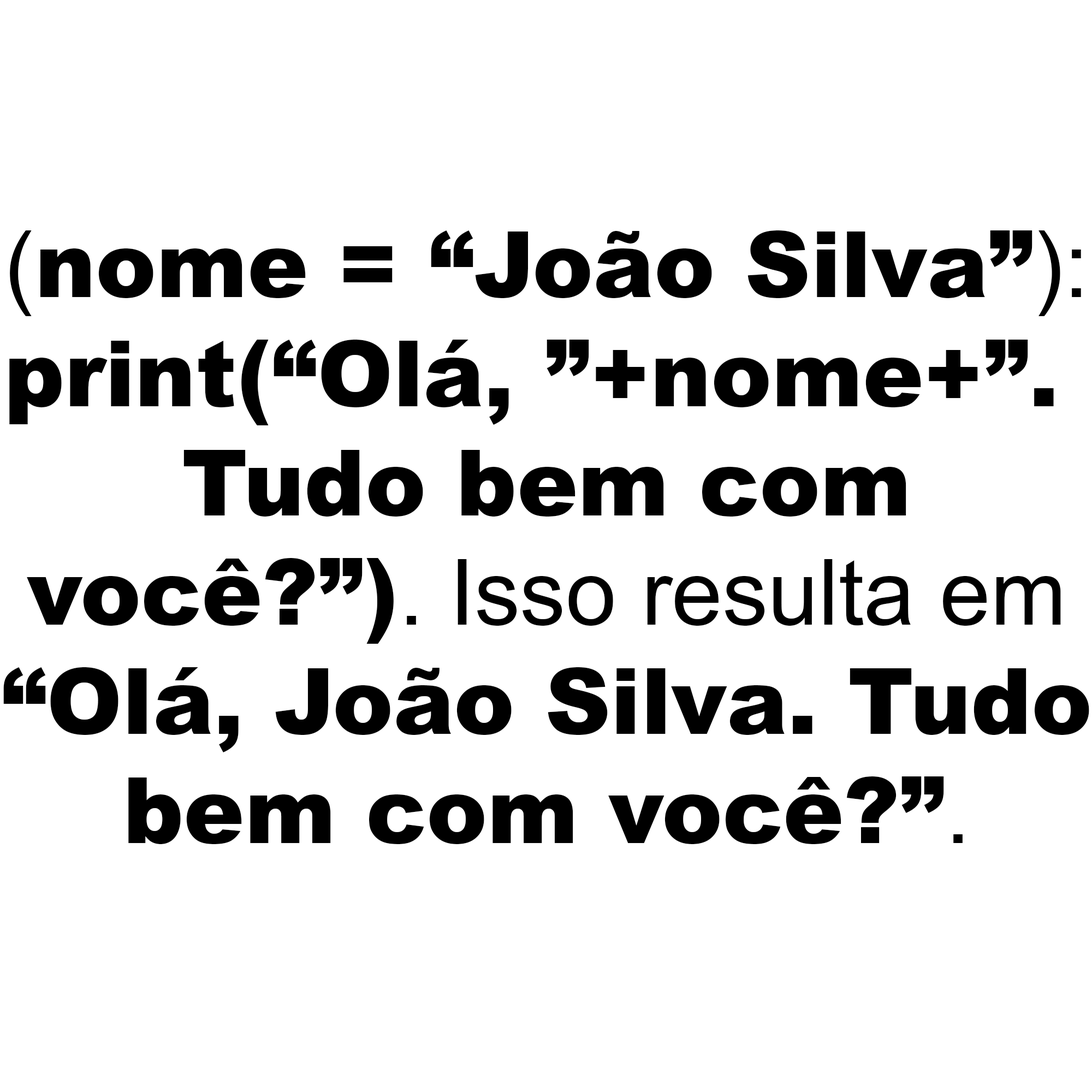
<style>
.page{position:relative;width:1092px;height:1092px;background:#ffffff}
.page>*{position:absolute;margin:0}
.t1{font:91px "Arial-Black";color:#000000}
.t2{font:91px "ArialMT";color:#000000}
</style>
<div class="page">
<p class="t1" style="left:3px;top:230px;width:1086px;height:614px;text-align:center"><span class="t2">(</span>nome = “João Silva”<span class="t2">):<br></span>print(“Olá, ”+nome+”. <br>Tudo bem com<br>você?”)<span class="t2">. Isso resulta em<br></span>“Olá, João Silva. Tudo<br>bem com você?”<span class="t2">.</span></p>
</div>
